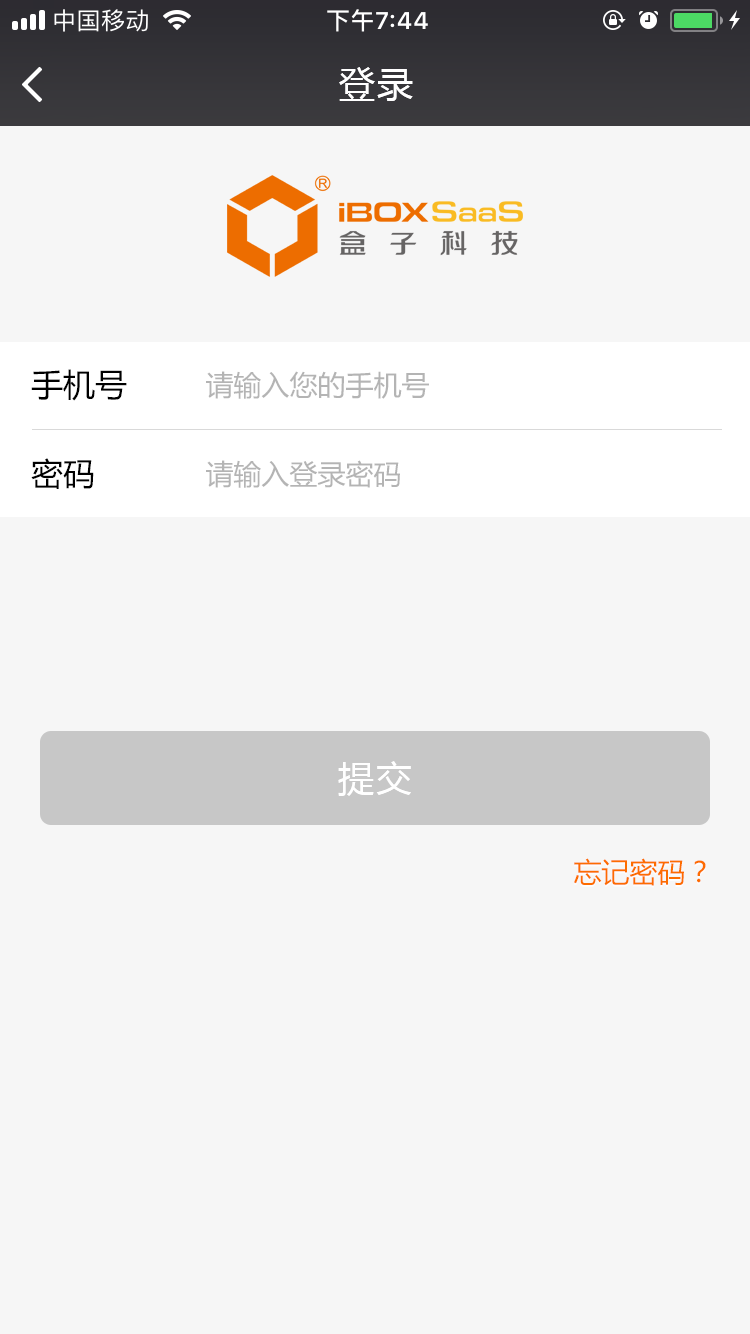
<style>
.page{position:relative;width:750px;height:1334px;background:#f6f6f6}
.page>*{position:absolute;margin:0}
.t1{font:36px "MicrosoftYaHei";letter-spacing:0.08em;color:#ffffff}
.t2{font:32px "MicrosoftYaHei";color:#000000}
.t3{font:28px "MicrosoftYaHei";color:#b4b4b4}
.t4{font:28px "MicrosoftYaHei";color:#fd6c00}
</style>
<div class="page">
<p class="t1" style="left:339px;top:67px;width:74px;height:34px">登录</p>
<p class="t2" style="left:31px;top:369px;width:96px;height:32px">手机号</p>
<p class="t3" style="left:206px;top:371px;width:223px;height:28px">请输入您的手机号</p>
<p class="t2" style="left:31px;top:458px;width:63px;height:31px">密码</p>
<p class="t3" style="left:206px;top:460px;width:194px;height:28px">请输入登录密码</p>
<p class="t1" style="left:338px;top:761px;width:73px;height:35px">提交</p>
<p class="t4" style="left:574px;top:858px;width:132px;height:28px">忘记密码？</p>
</div>
